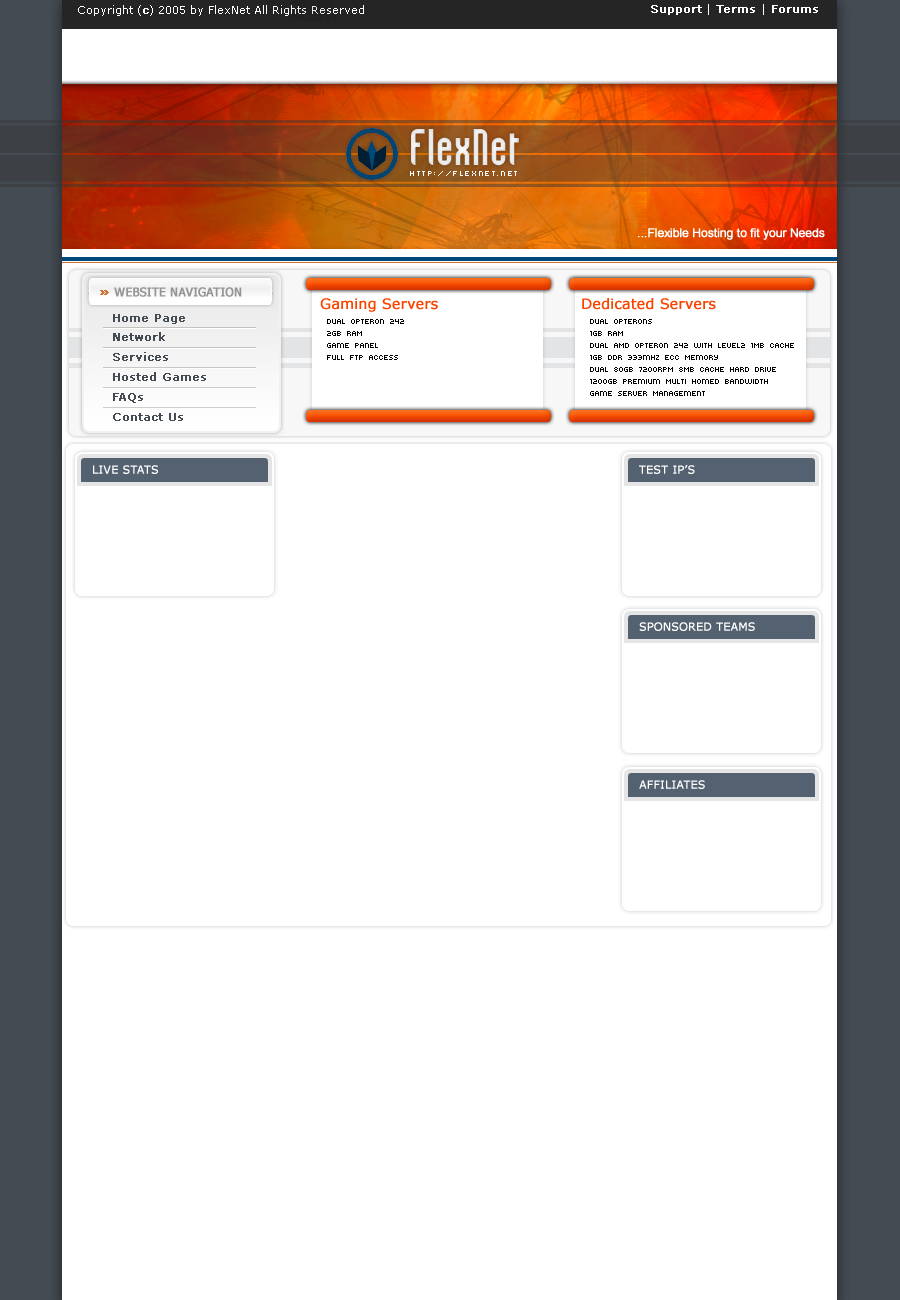
<style>
.page{position:relative;width:900px;height:1300px;background:#ffffff}
.page>*{position:absolute;margin:0}
.t1{font:11px "Verdana";color:#ffffff}
.t2{font:11px "Verdana";color:#ffffff;font-weight:bold}
.t3{font:36px "Roundy-Regular";color:#ffffff}
.t4{font:10px "kroeger 05_55";letter-spacing:0.16em;color:#ffffff}
.t5{font:12px "kroeger 05_55";color:#ffffff;font-weight:bold}
.t6{font:12px "Tahoma";color:#959595;font-weight:bold}
.t7{font:14px "Verdana";color:#fa4400;font-weight:bold}
.t8{font:11px/19.9px "Verdana";color:#444b53;font-weight:bold}
.t9{font:10px "kroeger 05_55";color:#000000}
</style>
<div class="page">
<p class="t1" style="left:78px;top:5px;width:286px;height:11px">Copyright (<span class="t2">c</span>) 2005 by FlexNet All Rights Reserved</p>
<p class="t2" style="left:651px;top:4px;width:167px;height:11px">Support<span class="t1"> |</span> Terms <span class="t1">|</span> Forums</p>
<p class="t3" style="left:411px;top:129px;width:108px;height:37px">FlexNet</p>
<p class="t4" style="left:410px;top:171px;width:107px;height:5px">http://flexnet.net</p>
<p class="t5" style="left:638px;top:228px;width:187px;height:12px">...Flexible Hosting to fit your Needs</p>
<p class="t6" style="left:114px;top:287px;width:128px;height:10px">WEBSITE NAVIGATION</p>
<p class="t7" style="left:320px;top:298px;width:118px;height:14px">Gaming Servers</p>
<p class="t7" style="left:582px;top:298px;width:134px;height:12px">Dedicated Servers</p>
<p class="t8" style="left:113px;top:314px;width:93px;height:107px">Home Page<br>Network<br>Services<br>Hosted Games<br>FAQs<br>Contact Us</p>
<p class="t9" style="left:327px;top:319px;width:77px;height:41px">Dual Opteron 242<br> 2GB RAM<br> Game Panel<br> Full FTP Access</p>
<p class="t9" style="left:590px;top:319px;width:204px;height:77px">Dual Opterons<br> 1GB RAM<br> Dual AMD Opteron 242 with Level2 1MB cache<br> 1GB DDR 333mhz ECC Memory<br> Dual 80GB 7200RPM 8MB Cache Hard Drive<br> 1200GB Premium Multi Homed Bandwidth<br> Game Server Management</p>
<p class="t2" style="left:93px;top:465px;width:65px;height:9px">LIVE STATS</p>
<p class="t2" style="left:639px;top:465px;width:56px;height:9px">TEST IP’S</p>
<p class="t2" style="left:639px;top:622px;width:116px;height:9px">SPONSORED TEAMS</p>
<p class="t2" style="left:639px;top:780px;width:66px;height:9px">AFFILIATES</p>
</div>
